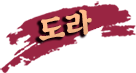
<style>
.page{position:relative;width:136px;height:73px;background:#ffffff}
.page>*{position:absolute;margin:0}
.t1{font:29px "SDKukdetopokki-bBd";letter-spacing:0.04em;color:#fab989}
</style>
<div class="page">
<p class="t1" style="left:39px;top:9px;width:53px;height:32px;rotate:-10deg">도라</p>
</div>
